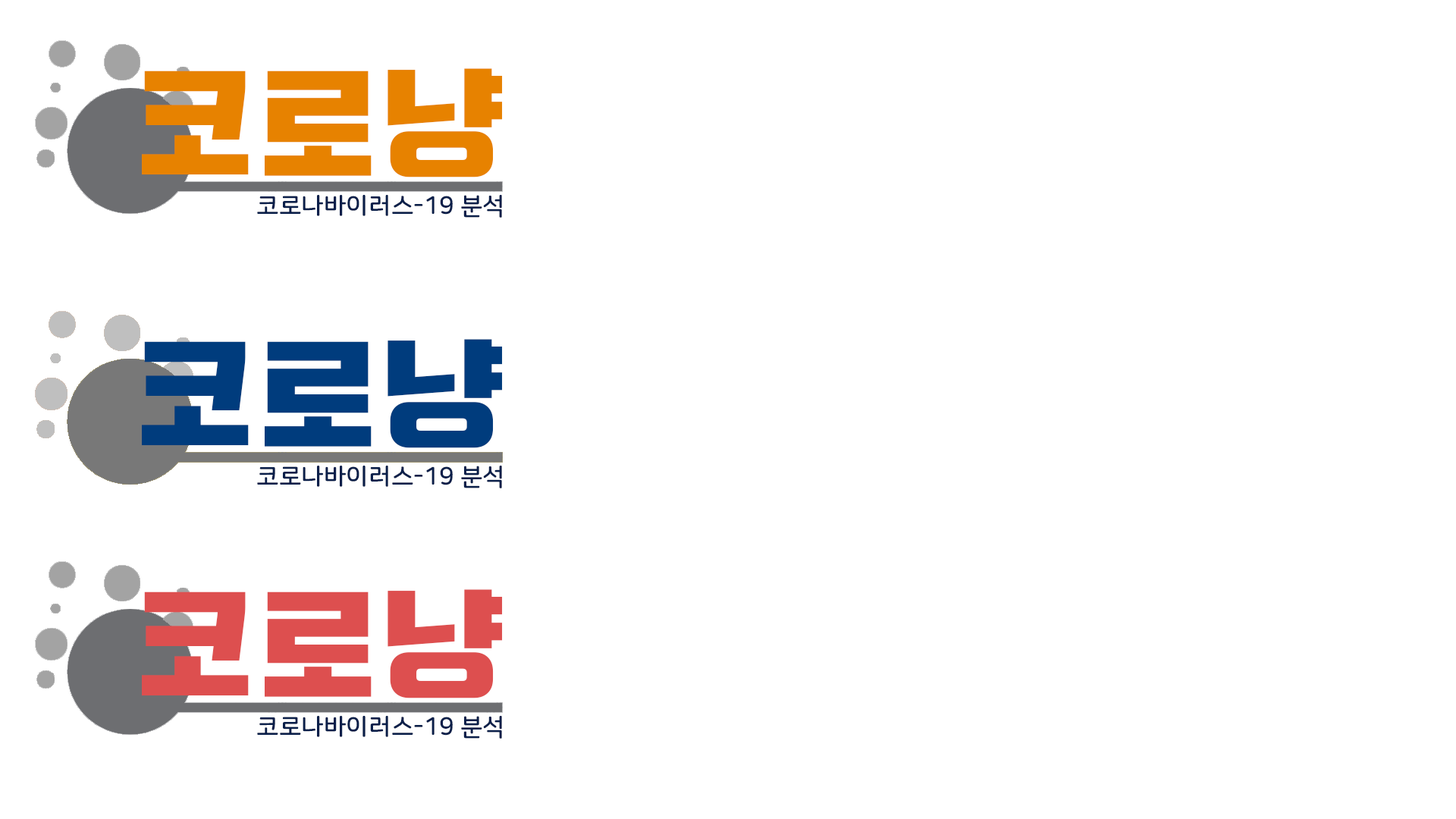
<style>
.page{position:relative;width:1456px;height:819px;background:#ffffff}
.page>*{position:absolute;margin:0}
.t1{font:122.8px "Typo_SsangmunDong_B";color:#e78200}
.t2{font:24.4px "NanumSquareRoundB";color:#0a1f4a}
.t3{font:122.8px "Typo_SsangmunDong_B";color:#003c7d}
.t4{font:122.8px "Typo_SsangmunDong_B";color:#dd4f4f}
</style>
<div class="page">
<p class="t1" style="left:142px;top:68px;width:361px;height:109px">코로냥</p>
<p class="t2" style="left:257px;top:195px;width:245px;height:23px">코로나바이러스-19 분석</p>
<p class="t3" style="left:142px;top:339px;width:361px;height:109px">코로냥</p>
<p class="t2" style="left:257px;top:466px;width:245px;height:22px">코로나바이러스-19 분석</p>
<p class="t4" style="left:142px;top:589px;width:361px;height:109px">코로냥</p>
<p class="t2" style="left:257px;top:716px;width:245px;height:23px">코로나바이러스-19 분석</p>
</div>
